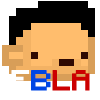
<style>
.page{position:relative;width:100px;height:100px;background:#ffffff}
.page>*{position:absolute;margin:0}
.t1{font:26.5px "Minecraft";color:#cc0000;font-weight:bold;scale:1.13 1}
.t2{font:26.5px "Minecraft";color:#ffffff;font-weight:bold;scale:1.13 1}
.t3{font:26.5px "Minecraft";color:#0046e4;font-weight:bold;scale:1.13 1}
</style>
<div class="page">
<p class="t1" style="left:11px;top:70px;width:79px;height:21px"><span class="t2">F</span><span class="t3">B</span>LA</p>
</div>
